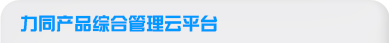
<style>
.page{position:relative;width:389px;height:43px;background:#eeeef0}
.page>*{position:absolute;margin:0}
.t1{font:18px "DFZongYi-Bd-80-Win-GB";color:#0099ff}
</style>
<div class="page">
<p class="t1" style="left:20px;top:15px;width:198px;height:17px">力同产品综合管理云平台</p>
</div>
